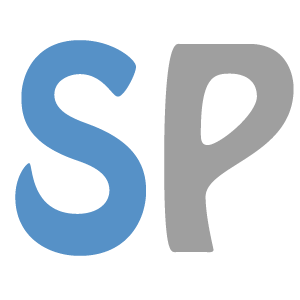
<style>
.page{position:relative;width:300px;height:300px;background:#ffffff}
.page>*{position:absolute;margin:0}
.t1{font:250px "HoboStd";color:#5691c8;scale:0.9 1}
.t2{font:250px "HoboStd";color:#9fa0a0;scale:0.9 1}
</style>
<div class="page">
<p class="t1" style="left:15px;top:40px;width:279px;height:216px">S<span class="t2">P</span></p>
</div>
